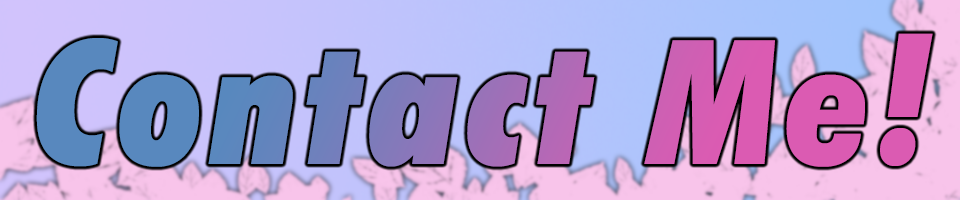
<style>
.page{position:relative;width:960px;height:200px}
.page>*{position:absolute;margin:0}
.t1{font:173.6px "FuturaBT-ExtraBlackCondItalic";letter-spacing:0.05em}
</style>
<div class="page">
<p class="t1" style="left:36px;top:33px;width:897px;height:134px">Contact Me!</p>
</div>
